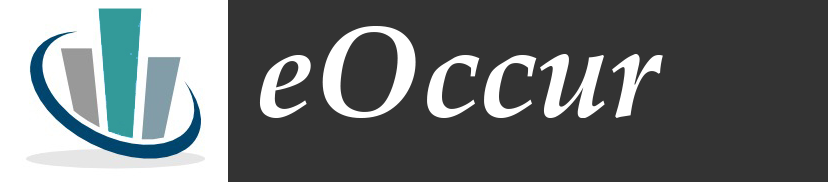
<style>
.page{position:relative;width:828px;height:182px;background:#333333}
.page>*{position:absolute;margin:0}
.t1{font:130px "Palatino-BoldItalic";color:#ffffff}
</style>
<div class="page">
<p class="t1" style="left:259px;top:26px;width:404px;height:92px">eOccur</p>
</div>
